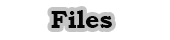
<style>
.page{position:relative;width:170px;height:40px;background:#ffffff}
.page>*{position:absolute;margin:0}
.t1{font:25px "BookmanOldStyle-Bold";color:#050505}
</style>
<div class="page">
<p class="t1" style="left:51px;top:10px;width:61px;height:18px">Files</p>
</div>
